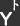
<style>
.page{position:relative;width:20px;height:26px;background:#333333}
.page>*{position:absolute;margin:0}
.t1{font:12px "DFKaiShu-SB-Estd-BF";color:#ffffff;font-weight:bold}
.t2{font:18px "ArialMT";color:#ffffff;font-weight:bold}
</style>
<div class="page">
<p class="t1" style="left:13px;top:0px;width:6px;height:11px">卜</p>
<p class="t2" style="left:0px;top:12px;width:13px;height:14px">Y</p>
</div>
